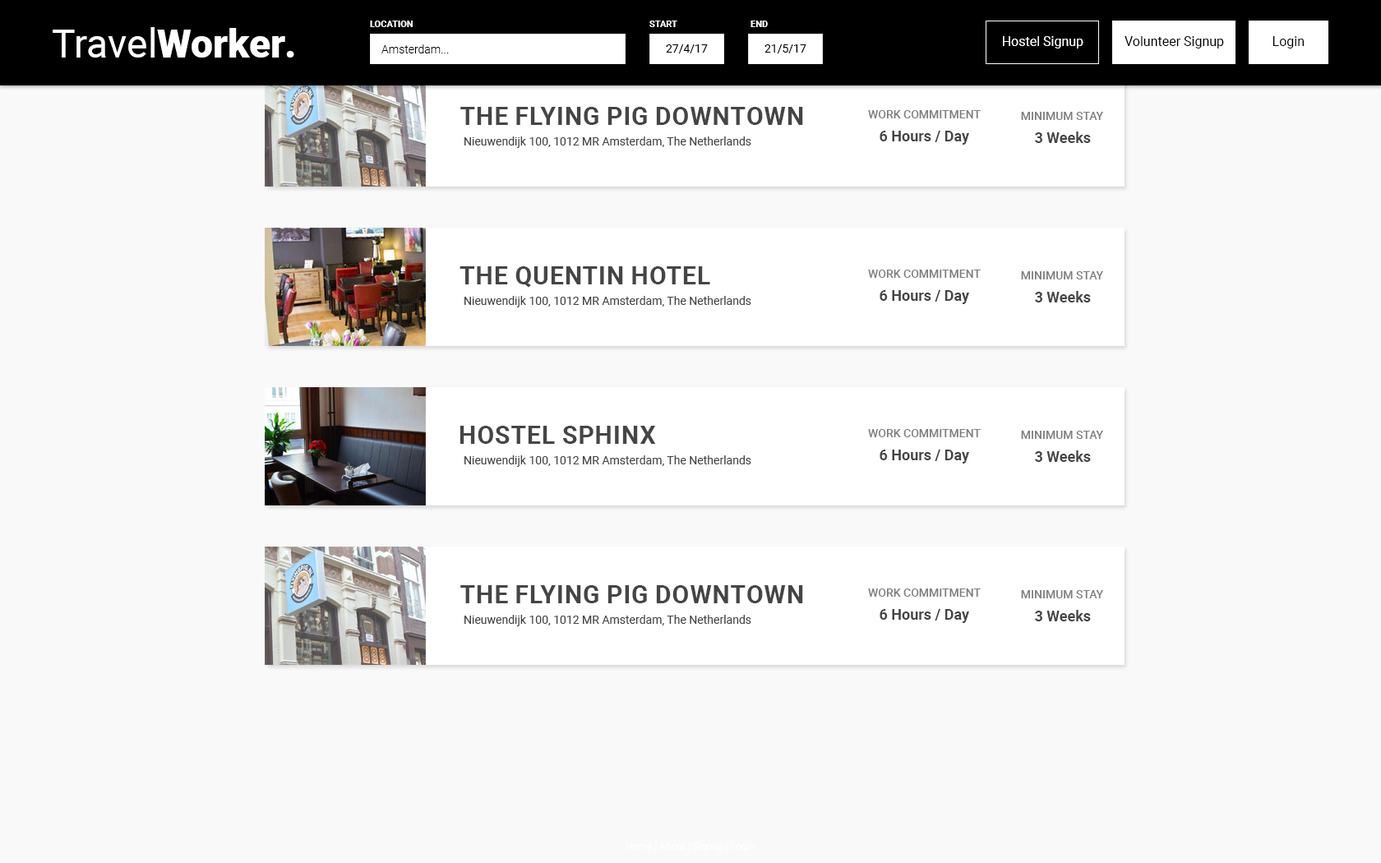
<style>
.page{position:relative;width:1381px;height:863px;background:#f9f9f9}
.page>*{position:absolute;margin:0}
.t1{font:39.5px "Roboto-Regular";color:#ffffff}
.t2{font:39.5px "Roboto-Black";color:#ffffff}
.t3{font:39.5px "Roboto-BlackItalic";color:#ffffff}
.t4{font:9px "Roboto-Bold";color:#ffffff}
.t5{font:13.2px "Roboto-Regular";color:#ffffff}
.t6{font:13.2px "Roboto-Regular";color:#000000}
.t7{font:11.5px "Roboto-Light";color:#000000}
.t8{font:11.5px "Roboto-Regular";color:#000000}
.t9{font:24.7px "Roboto-Bold";color:#454545;text-transform:uppercase}
.t10{font:11.5px "Roboto-Medium";color:#7e7e7e}
.t11{font:11.5px "Roboto-Regular";color:#454545}
.t12{font:14.8px "Roboto-Bold";color:#454545}
.t13{font:9.9px "Roboto-Regular";color:#ffffff}
</style>
<div class="page">
<p class="t1" style="left:53px;top:27px;width:241px;height:31px">Travel<span class="t2">Worker</span><span class="t3">.</span></p>
<p class="t4" style="left:370px;top:21px;width:43px;height:6px">LOCATION</p>
<p class="t4" style="left:650px;top:21px;width:27px;height:6px">START</p>
<p class="t4" style="left:751px;top:21px;width:17px;height:6px">END</p>
<p class="t5" style="left:1003px;top:36px;width:81px;height:13px">Hostel Signup</p>
<p class="t6" style="left:1125px;top:36px;width:99px;height:13px">Volunteer Signup</p>
<p class="t6" style="left:1273px;top:36px;width:32px;height:13px">Login</p>
<p class="t7" style="left:381px;top:44px;width:68px;height:9px">Amsterdam...</p>
<p class="t8" style="left:666px;top:44px;width:42px;height:9px">27/4/17</p>
<p class="t8" style="left:765px;top:44px;width:42px;height:9px">21/5/17</p>
<p class="t9" style="left:460px;top:107px;width:343px;height:18px">The Flying Pig Downtown</p>
<p class="t10" style="left:868px;top:110px;width:113px;height:8px">WORK COMMITMENT</p>
<p class="t10" style="left:1021px;top:112px;width:82px;height:8px">MINIMUM STAY</p>
<p class="t11" style="left:465px;top:136px;width:286px;height:12px">Nieuwendijk 100, 1012 MR Amsterdam, The Netherlands</p>
<p class="t12" style="left:880px;top:131px;width:89px;height:14px">6 Hours / Day</p>
<p class="t12" style="left:1035px;top:132px;width:56px;height:11px">3 Weeks</p>
<p class="t9" style="left:460px;top:266px;width:250px;height:22px">THE QUENTIN HOTEL</p>
<p class="t10" style="left:868px;top:270px;width:113px;height:8px">WORK COMMITMENT</p>
<p class="t10" style="left:1021px;top:271px;width:82px;height:9px">MINIMUM STAY</p>
<p class="t12" style="left:880px;top:290px;width:89px;height:14px">6 Hours / Day</p>
<p class="t12" style="left:1035px;top:291px;width:56px;height:12px">3 Weeks</p>
<p class="t11" style="left:465px;top:296px;width:286px;height:11px">Nieuwendijk 100, 1012 MR Amsterdam, The Netherlands</p>
<p class="t9" style="left:460px;top:426px;width:196px;height:18px">HOSTEL SPHINX</p>
<p class="t10" style="left:868px;top:429px;width:113px;height:8px">WORK COMMITMENT</p>
<p class="t10" style="left:1021px;top:431px;width:82px;height:8px">MINIMUM STAY</p>
<p class="t12" style="left:880px;top:450px;width:89px;height:14px">6 Hours / Day</p>
<p class="t11" style="left:465px;top:455px;width:286px;height:12px">Nieuwendijk 100, 1012 MR Amsterdam, The Netherlands</p>
<p class="t12" style="left:1035px;top:451px;width:56px;height:11px">3 Weeks</p>
<p class="t9" style="left:460px;top:585px;width:343px;height:18px">The Flying Pig Downtown</p>
<p class="t10" style="left:868px;top:589px;width:113px;height:8px">WORK COMMITMENT</p>
<p class="t10" style="left:1021px;top:590px;width:82px;height:9px">MINIMUM STAY</p>
<p class="t11" style="left:465px;top:615px;width:286px;height:12px">Nieuwendijk 100, 1012 MR Amsterdam, The Netherlands</p>
<p class="t12" style="left:880px;top:609px;width:89px;height:14px">6 Hours / Day</p>
<p class="t12" style="left:1035px;top:610px;width:56px;height:12px">3 Weeks</p>
<p class="t13" style="left:627px;top:843px;width:128px;height:9px">Home | About | Signup | Login</p>
</div>
